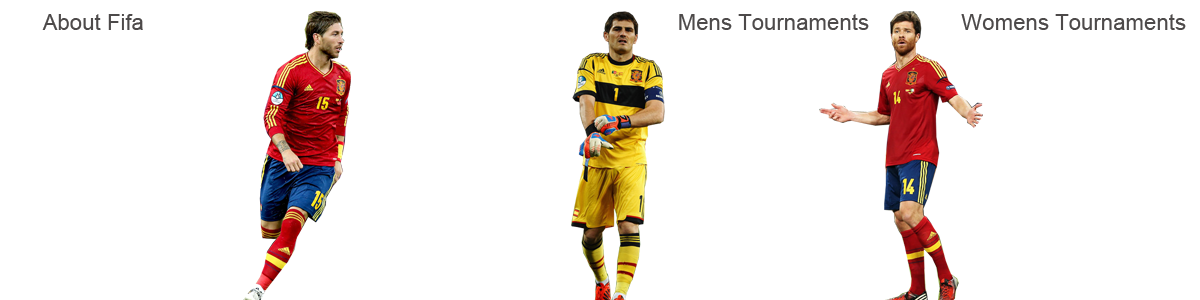
<style>
.page{position:relative;width:1200px;height:300px;background:#ffffff}
.page>*{position:absolute;margin:0}
.t1{font:22.2px "ArialMT";color:#4d4a4a}
</style>
<div class="page">
<p class="t1" style="left:42px;top:14px;width:101px;height:16px">About Fifa</p>
<p class="t1" style="left:679px;top:14px;width:190px;height:16px">Mens Tournaments</p>
<p class="t1" style="left:961px;top:14px;width:225px;height:16px">Womens Tournaments</p>
</div>
